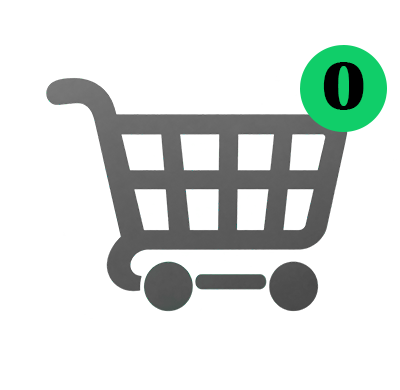
<style>
.page{position:relative;width:400px;height:390px;background:#ffffff}
.page>*{position:absolute;margin:0}
.t1{font:71.4px "BritannicBold";color:#000000}
</style>
<div class="page">
<p class="t1" style="left:323px;top:62px;width:41px;height:48px">0</p>
</div>
